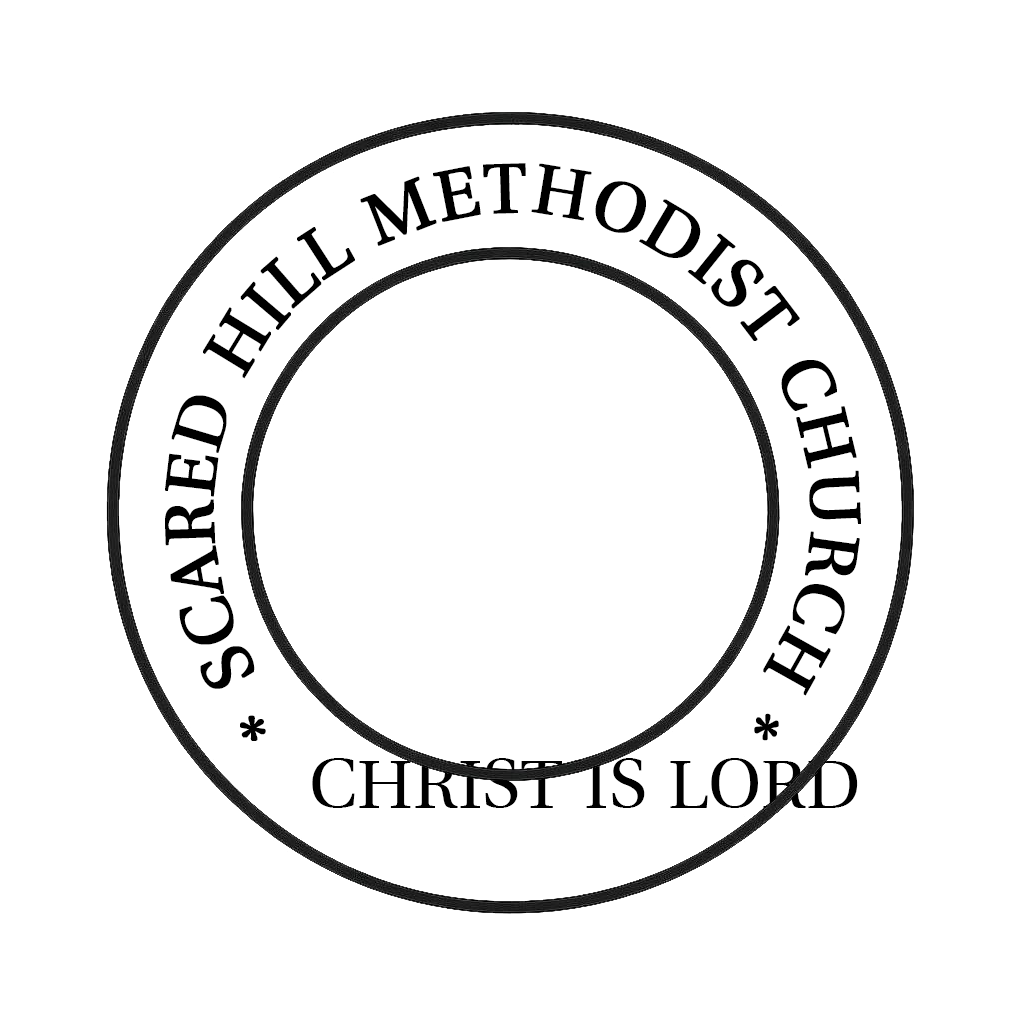
<style>
.page{position:relative;width:1024px;height:1024px;background:#ffffff}
.page>*{position:absolute;margin:0}
.t1{font:70px/100px "UHoiH11";color:#000000;text-transform:uppercase;font-weight:bold}
.t2{font:70px "UHoiH11";color:#000000;text-transform:uppercase}
</style>
<div class="page">
<p class="t1" style="left:165px;top:163px;width:696px;height:578px">* Scared hill methodist church *</p>
<p class="t2" style="left:312px;top:758px;width:546px;height:50px">christ is lord</p>
</div>
